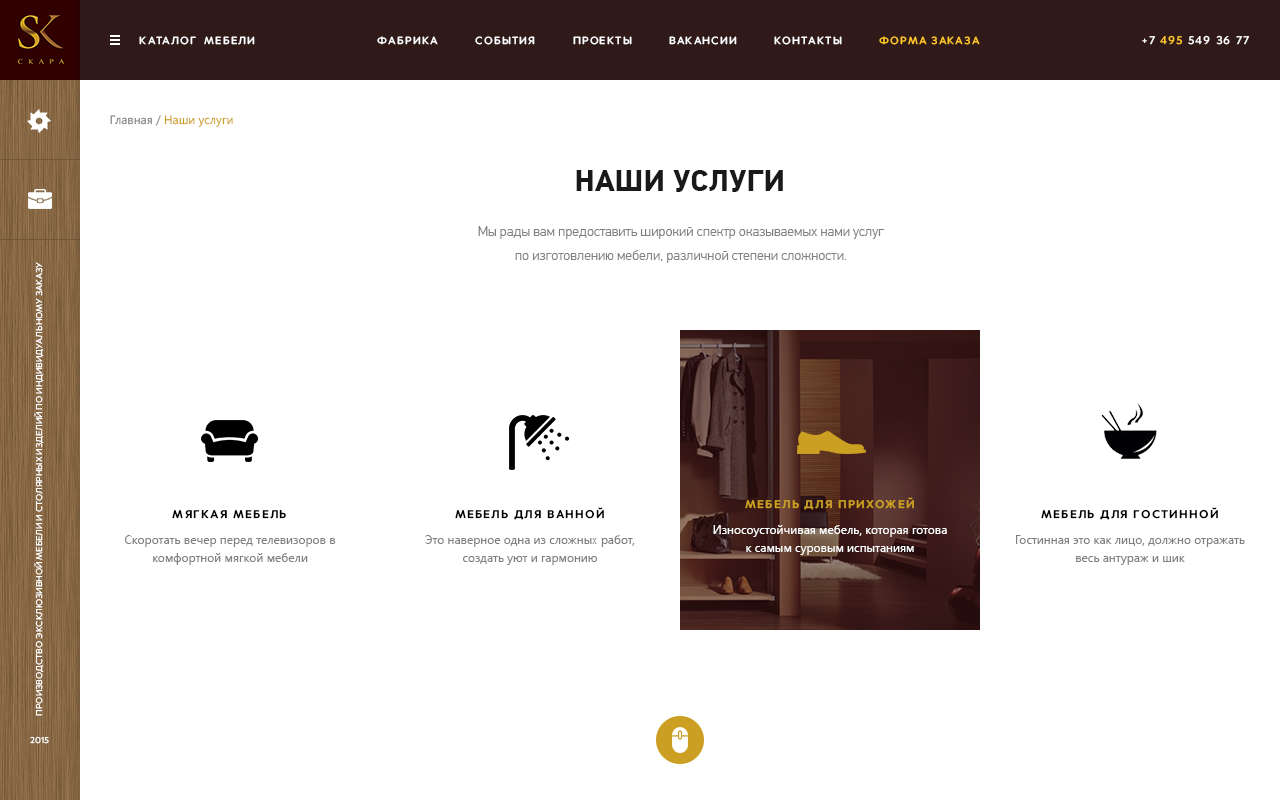
<style>
.page{position:relative;width:1280px;height:800px;background:#ffffff}
.page>*{position:absolute;margin:0}
.t1{font:11px "Merel-Medium";letter-spacing:0.1em;color:#ffffff;text-transform:uppercase}
.t2{font:11px "Merel-Medium";letter-spacing:0.1em;color:#ffc72b;text-transform:uppercase}
.t3{font:12px "Merel-Medium";letter-spacing:0.1em;color:#ffffff;text-transform:uppercase}
.t4{font:12px "Merel-Medium";letter-spacing:0.1em;color:#ffc72b;text-transform:uppercase}
.t5{font:12px "SegoeUI";color:#cb9f22}
.t6{font:12px "SegoeUI";color:#808080}
.t7{font:30px "PFDinTextPro-Bold";color:#191919;text-transform:uppercase}
.t8{font:14px/24px "PFDinTextPro-Light";color:#808080}
.t9{font:9px "Merel-Regular";color:#ffffff;text-transform:uppercase}
.t10{font:12px "Merel-Bold";letter-spacing:0.1em;color:#cb9f22;text-transform:uppercase}
.t11{font:12px "Merel-Bold";letter-spacing:0.1em;color:#000000;text-transform:uppercase}
.t12{font:12px/18px "SegoeUI";color:#ffffff}
.t13{font:12px/18px "SegoeUI";color:#808080}
</style>
<div class="page">
<p class="t1" style="left:139px;top:36px;width:116px;height:9px">каталог  мебели</p>
<p class="t1" style="left:377px;top:36px;width:603px;height:9px">фабрика          события          проекты          вакансии          контакты<span class="t2">          форма заказа</span></p>
<p class="t3" style="left:1142px;top:35px;width:108px;height:10px">+7 <span class="t4">495</span> 549 36 77</p>
<p class="t5" style="left:110px;top:115px;width:123px;height:12px"><span class="t6">Главная / </span>Наши услуги</p>
<p class="t7" style="left:576px;top:170px;width:207px;height:22px">наши услуги</p>
<p class="t8" style="left:478px;top:226px;width:407px;height:37px;text-align:center">Мы рады вам предоставить широкий спектр оказываемых нами услуг<br>по изготовлению мебели, различной степени сложности.</p>
<p class="t9" style="left:34px;top:262px;width:10px;height:454px;rotate:-90deg">производство эксклюзивной мебели и столярных изделий по индивидуальному заказу</p>
<p class="t10" style="left:745px;top:497px;width:169px;height:13px">Мебель для прихожей</p>
<p class="t11" style="left:172px;top:510px;width:114px;height:9px">мягкая мебель</p>
<p class="t11" style="left:455px;top:507px;width:149px;height:13px">Мебель для ванной</p>
<p class="t11" style="left:1041px;top:507px;width:177px;height:13px">мебель для гостинной</p>
<p class="t12" style="left:713px;top:525px;width:234px;height:30px;text-align:center">Износоустойчивая мебель, которая готова к самым суровым испытаниям</p>
<p class="t13" style="left:125px;top:535px;width:211px;height:30px;text-align:center">Скоротать вечер перед телевизоров в комфортной мягкой мебели</p>
<p class="t13" style="left:425px;top:535px;width:210px;height:30px;text-align:center">Это наверное одна из сложных работ, создать уют и гармонию</p>
<p class="t13" style="left:1016px;top:535px;width:229px;height:30px;text-align:center">Гостинная это как лицо, должно отражать весь антураж и шик</p>
<p class="t9" style="left:30px;top:736px;width:19px;height:8px">2015</p>
</div>
